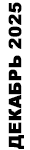
<style>
.page{position:relative;width:30px;height:150px;background:#ffffff}
.page>*{position:absolute;margin:0}
.t1{font:17px "Arial-Black";color:#000000;font-weight:bold}
</style>
<div class="page">
<p class="t1" style="left:8px;top:2px;width:16px;height:147px;rotate:-90deg">ДЕКАБРЬ 2025</p>
</div>
